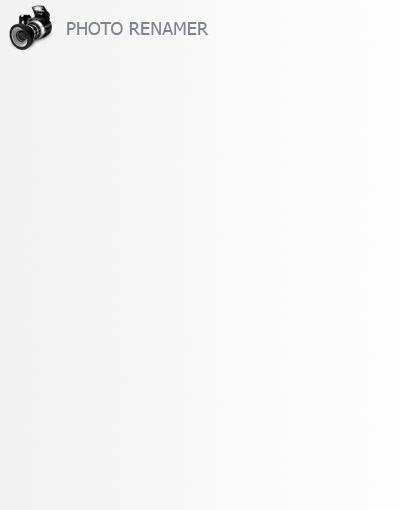
<style>
.page{position:relative;width:400px;height:510px}
.page>*{position:absolute;margin:0}
.t1{font:18px "Tahoma";color:#80838e}
</style>
<div class="page">
<p class="t1" style="left:67px;top:22px;width:142px;height:13px">PHOTO RENAMER</p>
</div>
